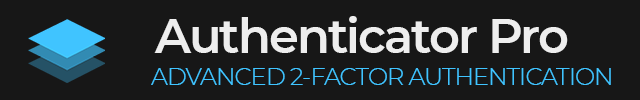
<style>
.page{position:relative;width:640px;height:100px;background:#171717}
.page>*{position:absolute;margin:0}
.t1{font:48px "Montserrat-SemiBold";letter-spacing:-0.04em;color:#eeeeee}
.t2{font:24px "Montserrat-Light";letter-spacing:-0.04em;color:#40c4ff}
</style>
<div class="page">
<p class="t1" style="left:154px;top:16px;width:414px;height:37px">Authenticator Pro</p>
<p class="t2" style="left:151px;top:68px;width:460px;height:17px">ADVANCED 2-FACTOR AUTHENTICATION</p>
</div>
